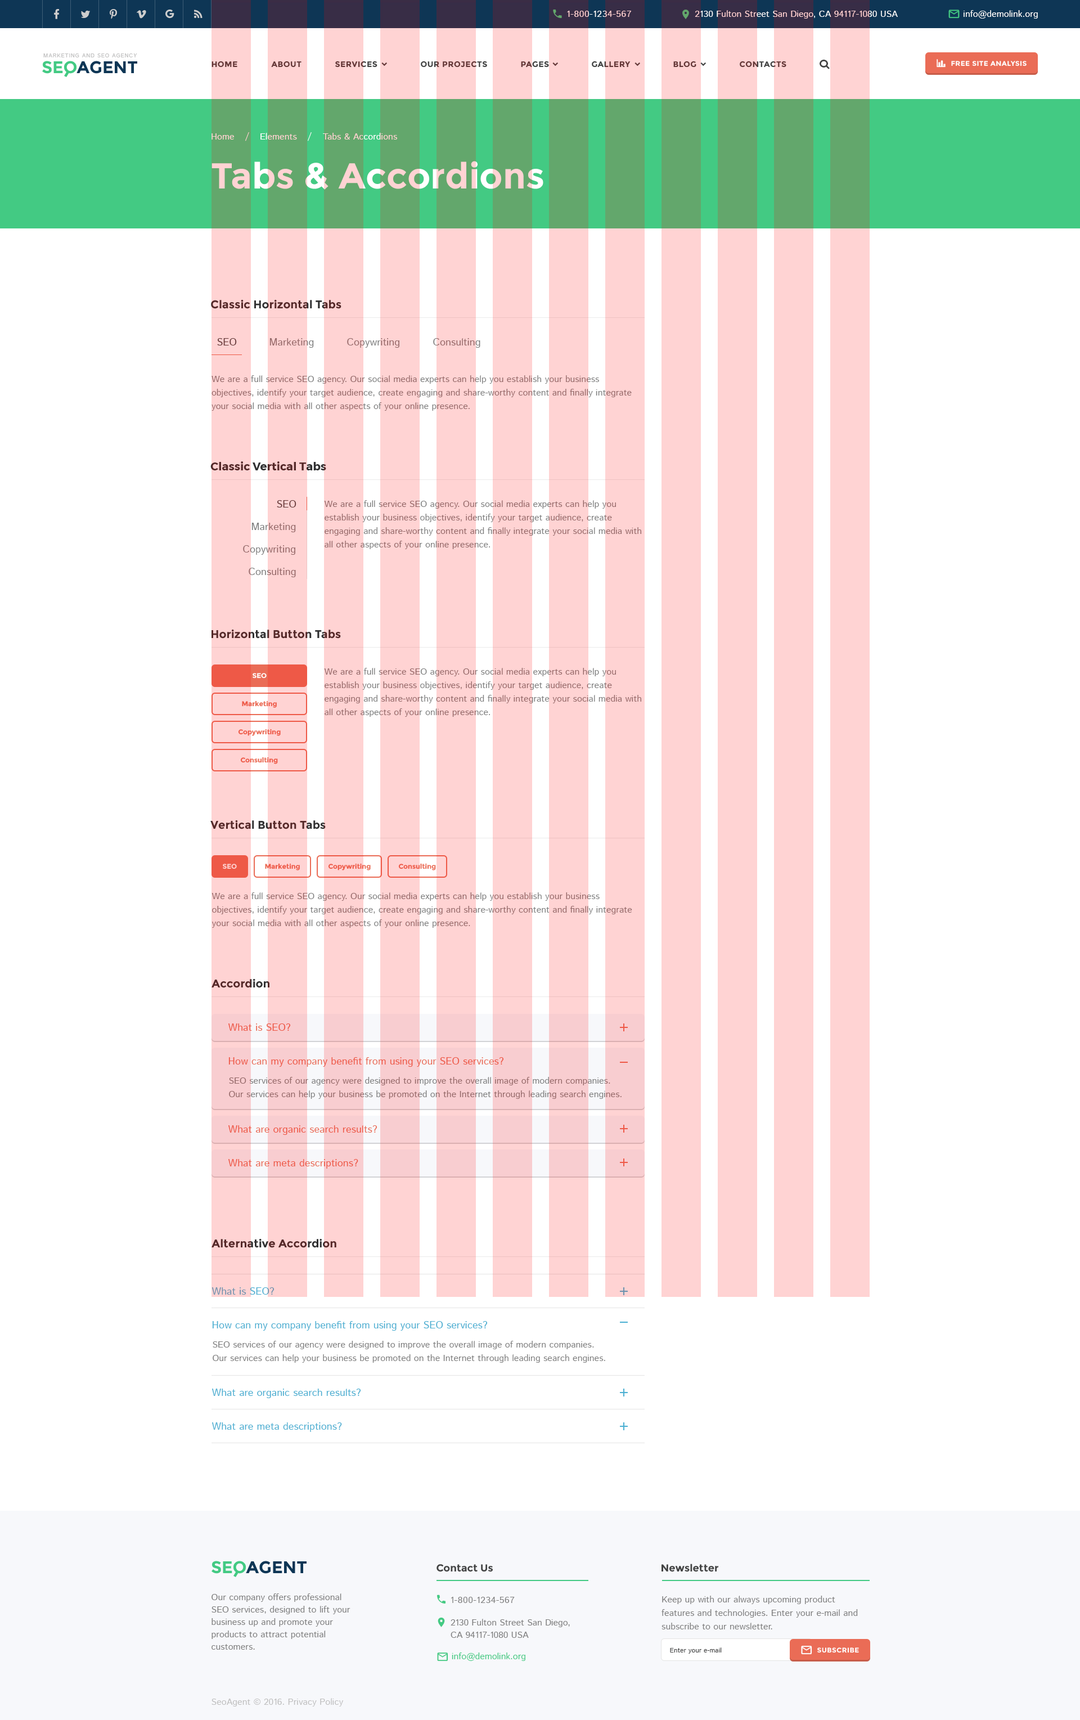
<style>
.page{position:relative;width:1080px;height:1720px;background:#ffffff}
.page>*{position:absolute;margin:0}
.t1{font:9px "IstokWeb-Regular";letter-spacing:0.04em;color:#ffd3d3;text-transform:uppercase}
.t2{font:9px "IstokWeb-Regular"}
.t3{font:9px "IstokWeb-Regular";color:#ffffff}
.t4{font:5.6px "IstokWeb-Regular";letter-spacing:0.08em;color:#c1c1c1;text-transform:uppercase}
.t5{font:16.9px "Montserrat-Bold";color:#43ca83}
.t6{font:16.9px "Montserrat-Bold";color:#0e3655}
.t7{font:7.9px "Montserrat-Bold";letter-spacing:0.04em;color:#633737;text-transform:uppercase}
.t8{font:7.9px "Montserrat-Bold";letter-spacing:0.04em;text-transform:uppercase}
.t9{font:6.7px "Montserrat-Bold";letter-spacing:0.04em;color:#ffffff;text-transform:uppercase}
.t10{font:9px "IstokWeb-Regular";color:#ffd3d3}
.t11{font:36px "Montserrat-Bold"}
.t12{font:11.2px "Montserrat-Bold";color:#552929}
.t13{font:10.1px "IstokWeb-Regular";color:#633737}
.t14{font:10.1px "IstokWeb-Regular";color:#7f7f7f}
.t15{font:9px/13.5px "IstokWeb-Regular";color:#7f7f7f}
.t16{font:11.2px "Montserrat-Bold"}
.t17{font:6.7px "Montserrat-Bold";color:#ffffff}
.t18{font:6.7px "Montserrat-Bold";color:#ea6c56}
.t19{font:6.7px "Montserrat-Bold";color:#ffd3d3}
.t20{font:10.1px "IstokWeb-Regular";color:#ea6c56}
.t21{font:10.1px "IstokWeb-Regular"}
.t22{font:10.1px "IstokWeb-Regular";color:#4bafd2}
.t23{font:10.1px "Montserrat-Bold";color:#424343}
.t24{font:9px/12.4px "IstokWeb-Regular";color:#7f7f7f}
.t25{font:9px "IstokWeb-Regular";letter-spacing:0.04em;color:#7f7f7f;text-transform:uppercase}
.t26{font:6.8px "IstokWeb-Regular";color:#424343}
.t27{font:9px "IstokWeb-Regular";color:#43ca83}
.t28{font:9px "IstokWeb-Regular";color:#c0c0c0}
</style>
<div class="page">
<p class="t1" style="left:567px;top:11px;width:64px;height:6px">1-800-1234-567</p>
<p class="t2" style="left:695px;top:10px;width:203px;height:9px">2130 Fulton Street San Diego, CA 94117-1080 USA</p>
<p class="t3" style="left:964px;top:10px;width:74px;height:9px">info@demolink.org</p>
<p class="t4" style="left:43px;top:53px;width:94px;height:4px">Marketing and SEO agency</p>
<p class="t5" style="left:42px;top:61px;width:34px;height:13px">SEO</p>
<p class="t6" style="left:76px;top:61px;width:61px;height:13px">AGENT</p>
<p class="t7" style="left:212px;top:61px;width:25px;height:7px">Home</p>
<p class="t7" style="left:271px;top:61px;width:31px;height:7px">about</p>
<p class="t8" style="left:335px;top:61px;width:42px;height:7px">services</p>
<p class="t8" style="left:421px;top:61px;width:66px;height:7px">our projects</p>
<p class="t8" style="left:521px;top:61px;width:28px;height:7px">pages</p>
<p class="t8" style="left:592px;top:61px;width:39px;height:7px">gallery</p>
<p class="t7" style="left:673px;top:61px;width:23px;height:7px">blog</p>
<p class="t8" style="left:740px;top:61px;width:46px;height:7px">contacts</p>
<p class="t9" style="left:951px;top:61px;width:76px;height:5px">Free Site Analysis</p>
<p class="t10" style="left:212px;top:133px;width:22px;height:7px">Home</p>
<p class="t2" style="left:245px;top:132px;width:4px;height:9px">/</p>
<p class="t2" style="left:260px;top:133px;width:37px;height:7px">Elements</p>
<p class="t3" style="left:308px;top:132px;width:4px;height:9px">/</p>
<p class="t10" style="left:323px;top:133px;width:74px;height:7px">Tabs &amp; Accordions</p>
<p class="t11" style="left:212px;top:161px;width:331px;height:29px">Tabs &amp; Accordions</p>
<p class="t12" style="left:211px;top:299px;width:130px;height:10px">Classic Horizontal Tabs</p>
<p class="t13" style="left:217px;top:338px;width:20px;height:7px">SEO</p>
<p class="t14" style="left:269px;top:338px;width:45px;height:10px">Marketing</p>
<p class="t14" style="left:347px;top:338px;width:52px;height:10px">Copywriting</p>
<p class="t14" style="left:433px;top:338px;width:47px;height:10px">Consulting</p>
<p class="t15" style="left:212px;top:375px;width:420px;height:36px">We are a full service SEO agency. Our social media experts can help you establish your business objectives, identify your target audience, create engaging and share-worthy content and finally integrate your social media with all other aspects of your online presence.</p>
<p class="t16" style="left:210px;top:461px;width:116px;height:9px">Classic Vertical Tabs</p>
<p class="t13" style="left:277px;top:500px;width:19px;height:7px">SEO</p>
<p class="t15" style="left:324px;top:500px;width:318px;height:49px">We are a full service SEO agency. Our social media experts can help you establish your business objectives, identify your target audience, create engaging and share-worthy content and finally integrate your social media with all other aspects of your online presence.</p>
<p class="t14" style="left:251px;top:523px;width:45px;height:9px">Marketing</p>
<p class="t14" style="left:243px;top:545px;width:52px;height:10px">Copywriting</p>
<p class="t14" style="left:249px;top:568px;width:47px;height:9px">Consulting</p>
<p class="t12" style="left:212px;top:629px;width:129px;height:9px">Horizontal Button Tabs</p>
<p class="t17" style="left:253px;top:673px;width:14px;height:5px">SEO</p>
<p class="t15" style="left:324px;top:668px;width:318px;height:49px">We are a full service SEO agency. Our social media experts can help you establish your business objectives, identify your target audience, create engaging and share-worthy content and finally integrate your social media with all other aspects of your online presence.</p>
<p class="t18" style="left:242px;top:700px;width:35px;height:8px">Marketing</p>
<p class="t18" style="left:238px;top:728px;width:43px;height:8px">Copywriting</p>
<p class="t18" style="left:240px;top:757px;width:38px;height:7px">Consulting</p>
<p class="t16" style="left:210px;top:820px;width:116px;height:9px">Vertical Button Tabs</p>
<p class="t19" style="left:223px;top:863px;width:14px;height:6px">SEO</p>
<p class="t18" style="left:265px;top:863px;width:35px;height:7px">Marketing</p>
<p class="t18" style="left:328px;top:863px;width:43px;height:7px">Copywriting</p>
<p class="t18" style="left:398px;top:863px;width:38px;height:7px">Consulting</p>
<p class="t15" style="left:212px;top:892px;width:420px;height:36px">We are a full service SEO agency. Our social media experts can help you establish your business objectives, identify your target audience, create engaging and share-worthy content and finally integrate your social media with all other aspects of your online presence.</p>
<p class="t12" style="left:212px;top:978px;width:57px;height:10px">Accordion</p>
<p class="t20" style="left:228px;top:1023px;width:63px;height:7px">What is SEO?</p>
<p class="t20" style="left:228px;top:1057px;width:276px;height:9px">How can my company benefit from using your SEO services?</p>
<p class="t15" style="left:229px;top:1077px;width:393px;height:22px">SEO services of our agency were designed to improve the overall image of modern companies. Our services can help your business be promoted on the Internet through leading search engines.</p>
<p class="t20" style="left:228px;top:1125px;width:149px;height:10px">What are organic search results?</p>
<p class="t20" style="left:228px;top:1159px;width:130px;height:9px">What are meta descriptions?</p>
<p class="t12" style="left:212px;top:1238px;width:124px;height:10px">Alternative Accordion</p>
<p class="t21" style="left:212px;top:1287px;width:62px;height:7px">What is SEO?</p>
<p class="t22" style="left:212px;top:1321px;width:276px;height:9px">How can my company benefit from using your SEO services?</p>
<p class="t15" style="left:213px;top:1340px;width:392px;height:22px">SEO services of our agency were designed to improve the overall image of modern companies. Our services can help your business be promoted on the Internet through leading search engines.</p>
<p class="t22" style="left:212px;top:1388px;width:149px;height:10px">What are organic search results?</p>
<p class="t22" style="left:212px;top:1422px;width:130px;height:10px">What are meta descriptions?</p>
<p class="t5" style="left:212px;top:1560px;width:34px;height:13px">SEO</p>
<p class="t6" style="left:246px;top:1560px;width:61px;height:13px">AGENT</p>
<p class="t23" style="left:436px;top:1564px;width:57px;height:8px">Contact Us</p>
<p class="t23" style="left:662px;top:1563px;width:56px;height:9px">Newsletter</p>
<p class="t24" style="left:212px;top:1593px;width:138px;height:56px">Our company offers professional SEO services, designed to lift your business up and promote your products to attract potential customers.</p>
<p class="t25" style="left:451px;top:1596px;width:64px;height:7px">1-800-1234-567</p>
<p class="t15" style="left:662px;top:1595px;width:196px;height:34px">Keep up with our always upcoming product features and technologies. Enter your e-mail and subscribe to our newsletter.</p>
<p class="t24" style="left:451px;top:1618px;width:119px;height:19px">2130 Fulton Street San Diego,<br>CA 94117-1080 USA</p>
<p class="t26" style="left:670px;top:1647px;width:52px;height:6px">Enter your e-mail</p>
<p class="t9" style="left:817px;top:1647px;width:42px;height:6px">subscribe</p>
<p class="t27" style="left:452px;top:1652px;width:73px;height:8px">info@demolink.org</p>
<p class="t28" style="left:212px;top:1698px;width:132px;height:8px">SeoAgent © 2016. Privacy Policy</p>
</div>
